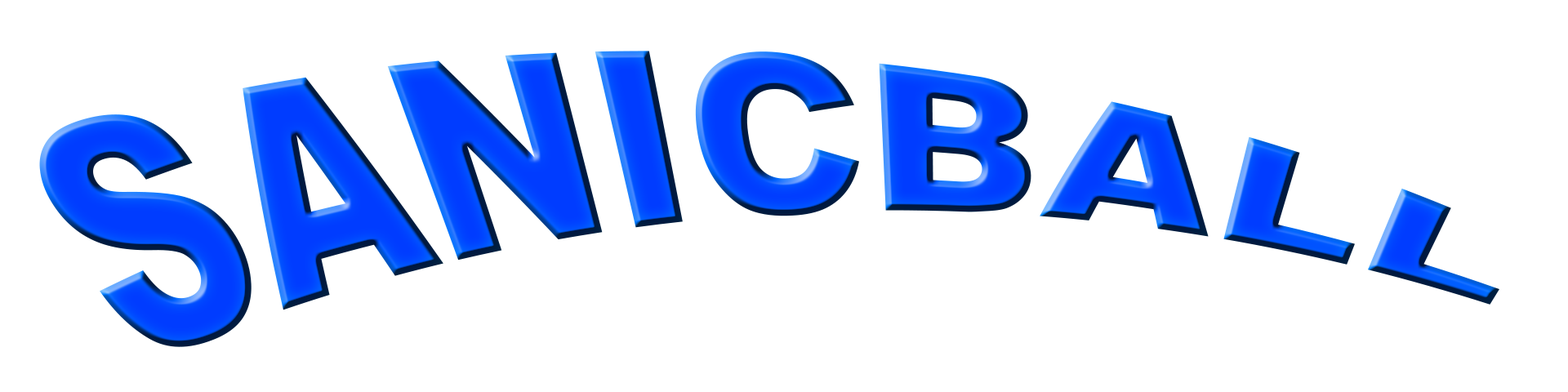
<style>
.page{position:relative;width:1568px;height:392px;background:#ffffff}
.page>*{position:absolute;margin:0}
.t1{font:209.1px "Arial-Black";color:#003cff}
</style>
<div class="page">
<p class="t1" style="left:39px;top:51px;width:1460px;height:296px">SANICBALL</p>
</div>
